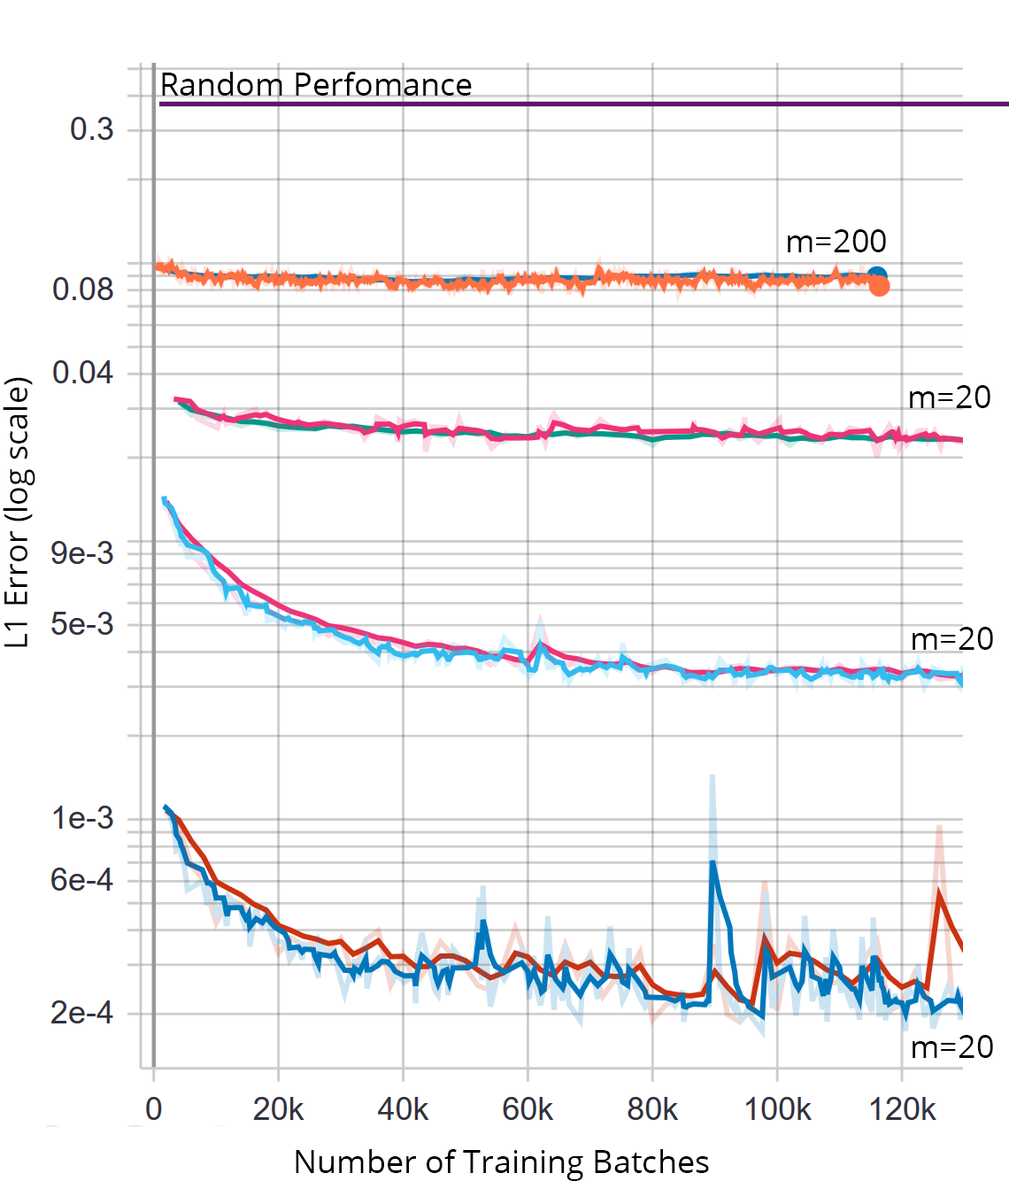
<style>
.page{position:relative;width:1009px;height:1181px;background:#ffffff}
.page>*{position:absolute;margin:0}
.t1{font:31.9px "OpenSans";color:#000000}
</style>
<div class="page">
<p class="t1" style="left:162px;top:72px;width:310px;height:24px">Random Perfomance</p>
<p class="t1" style="left:788px;top:229px;width:98px;height:23px">m=200</p>
<p class="t1" style="left:3px;top:377px;width:32px;height:270px;rotate:-90deg">L1 Error (log scale)</p>
<p class="t1" style="left:910px;top:385px;width:81px;height:23px">m=20</p>
<p class="t1" style="left:913px;top:627px;width:81px;height:23px">m=20</p>
<p class="t1" style="left:913px;top:1035px;width:81px;height:23px">m=20</p>
<p class="t1" style="left:296px;top:1149px;width:413px;height:32px">Number of Training Batches</p>
</div>
